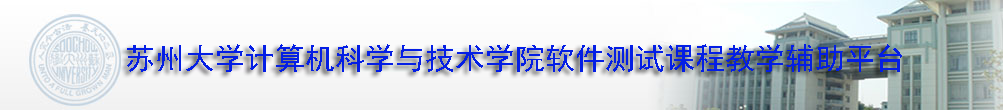
<style>
.page{position:relative;width:1003px;height:110px}
.page>*{position:absolute;margin:0}
.t1{font:30px "SimHei";color:#041ee5}
</style>
<div class="page">
<p class="t1" style="left:127px;top:44px;width:775px;height:28px">苏州大学计算机科学与技术学院软件测试课程教学辅助平台</p>
</div>
